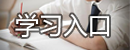
<style>
.page{position:relative;width:130px;height:50px}
.page>*{position:absolute;margin:0}
.t1{font:24.3px "MicrosoftYaHei";color:#ffffff}
</style>
<div class="page">
<p class="t1" style="left:15px;top:13px;width:94px;height:24px">学习入口</p>
</div>
